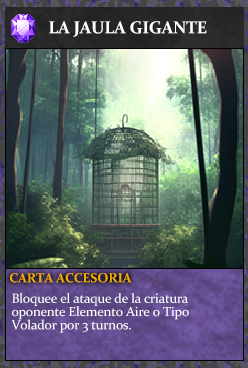
<style>
.page{position:relative;width:248px;height:368px}
.page>*{position:absolute;margin:0}
.t1{font:17.3px "Constantia-Bold";letter-spacing:-0.02em;color:#ffffff}
.t2{font:13.3px "Constantia-Bold";letter-spacing:-0.02em;color:#f2ac05}
.t3{font:13.3px/13.3px "Constantia";letter-spacing:-0.02em;color:#ffffff}
</style>
<div class="page">
<p class="t1" style="left:49px;top:21px;width:158px;height:16px">LA JAULA GIGANTE</p>
<p class="t2" style="left:10px;top:273px;width:122px;height:10px">CARTA ACCESORIA</p>
<p class="t3" style="left:11px;top:293px;width:178px;height:40px">Bloquee el ataque de la criatura <br>oponente Elemento Aire o Tipo <br>Volador por 3 turnos.</p>
</div>
